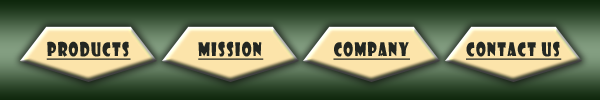
<style>
.page{position:relative;width:600px;height:100px}
.page>*{position:absolute;margin:0}
.t1{font:18.2px "ShowcardGothic-Reg";letter-spacing:0.1em;color:#232722;text-decoration:underline;scale:0.77 1}
</style>
<div class="page">
<p class="t1" style="left:46px;top:41px;width:85px;height:19px">PRODUCTS</p>
<p class="t1" style="left:198px;top:41px;width:66px;height:19px">MISSION</p>
<p class="t1" style="left:333px;top:41px;width:77px;height:19px">COMPANY</p>
<p class="t1" style="left:466px;top:41px;width:96px;height:19px">CONTACT US</p>
</div>
